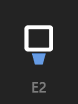
<style>
.page{position:relative;width:78px;height:104px;background:#232323}
.page>*{position:absolute;margin:0}
.t1{font:14px "SegoeUI";color:#7c7c7c;font-weight:bold}
</style>
<div class="page">
<p class="t1" style="left:32px;top:82px;width:14px;height:11px">E2</p>
</div>
